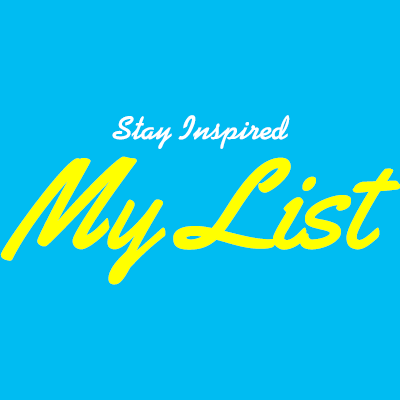
<style>
.page{position:relative;width:400px;height:400px;background:#00bcf2}
.page>*{position:absolute;margin:0}
.t1{font:33.3px "Alako-Bold";color:#ffffff}
.t2{font:124.7px "Yellowtail";color:#ffff00}
</style>
<div class="page">
<p class="t1" style="left:112px;top:115px;width:178px;height:34px">Stay Inspired</p>
<p class="t2" style="left:0px;top:156px;width:401px;height:129px">My List</p>
</div>
